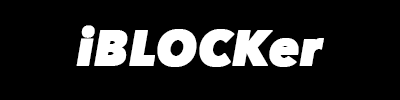
<style>
.page{position:relative;width:400px;height:100px;background:#000000}
.page>*{position:absolute;margin:0}
.t1{font:50.4px "AvenirNext-HeavyItalic";color:#ffffff;font-weight:bold;scale:0.95 1}
</style>
<div class="page">
<p class="t1" style="left:76px;top:25px;width:248px;height:42px">iBLOCKer</p>
</div>
